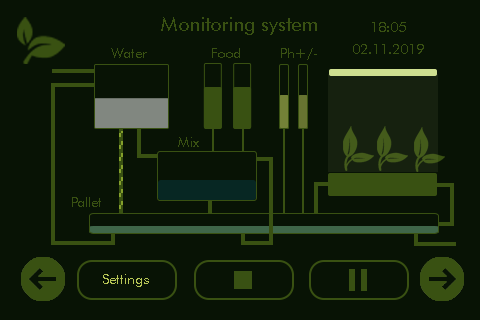
<style>
.page{position:relative;width:480px;height:320px;background:#081305}
.page>*{position:absolute;margin:0}
.t1{font:20px "FuturaBT-Book";color:#395112}
.t2{font:14px "FuturaBT-Book";color:#395112}
.t3{font:14px "FuturaBT-Book";color:#b7c656}
</style>
<div class="page">
<p class="t1" style="left:161px;top:17px;width:156px;height:18px">Monitoring system</p>
<p class="t2" style="left:372px;top:22px;width:34px;height:10px">18:05</p>
<p class="t2" style="left:111px;top:48px;width:36px;height:10px">Water</p>
<p class="t2" style="left:212px;top:48px;width:28px;height:10px">Food</p>
<p class="t2" style="left:281px;top:48px;width:36px;height:12px">Ph+/-</p>
<p class="t2" style="left:353px;top:44px;width:71px;height:10px">02.11.2019</p>
<p class="t2" style="left:178px;top:137px;width:21px;height:10px">Mix</p>
<p class="t2" style="left:72px;top:197px;width:29px;height:10px">Pallet</p>
<p class="t2" style="left:72px;top:197px;width:29px;height:10px">Pallet</p>
<p class="t3" style="left:103px;top:274px;width:46px;height:13px">Settings</p>
</div>
